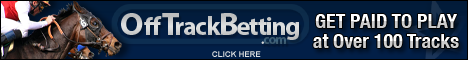
<style>
.page{position:relative;width:468px;height:60px}
.page>*{position:absolute;margin:0}
.t1{font:26px "MyriadPro-Bold";letter-spacing:-0.05em;color:#e0e2e2}
.t2{font:32.5px "MyriadPro-Bold";color:#e0e2e2}
.t3{font:26px "MyriadPro-Bold";letter-spacing:0.05em;color:#e0e2e2}
.t4{font:32.5px "MyriadPro-Bold";letter-spacing:-0.15em;color:#e0e2e2}
.t5{font:32.5px "MyriadPro-Bold";letter-spacing:-0.05em;color:#e0e2e2}
.t6{font:20px "HelveticaNeue-CondensedBold"}
.t7{font:8px "Arial-BoldMT";color:#e0e2e2}
</style>
<div class="page">
<p class="t1" style="left:120px;top:7px;width:179px;height:36px"><span class="t2">O</span><span class="t3">ff</span><span class="t4">T</span>rack<span class="t5">B</span>etting</p>
<p class="t6" style="left:315px;top:11px;width:142px;height:21px">GET PAID TO PLAY</p>
<p class="t6" style="left:313px;top:31px;width:146px;height:21px">at Over 100 Tracks</p>
<p class="t7" style="left:212px;top:50px;width:49px;height:10px">CLICK HERE</p>
</div>
